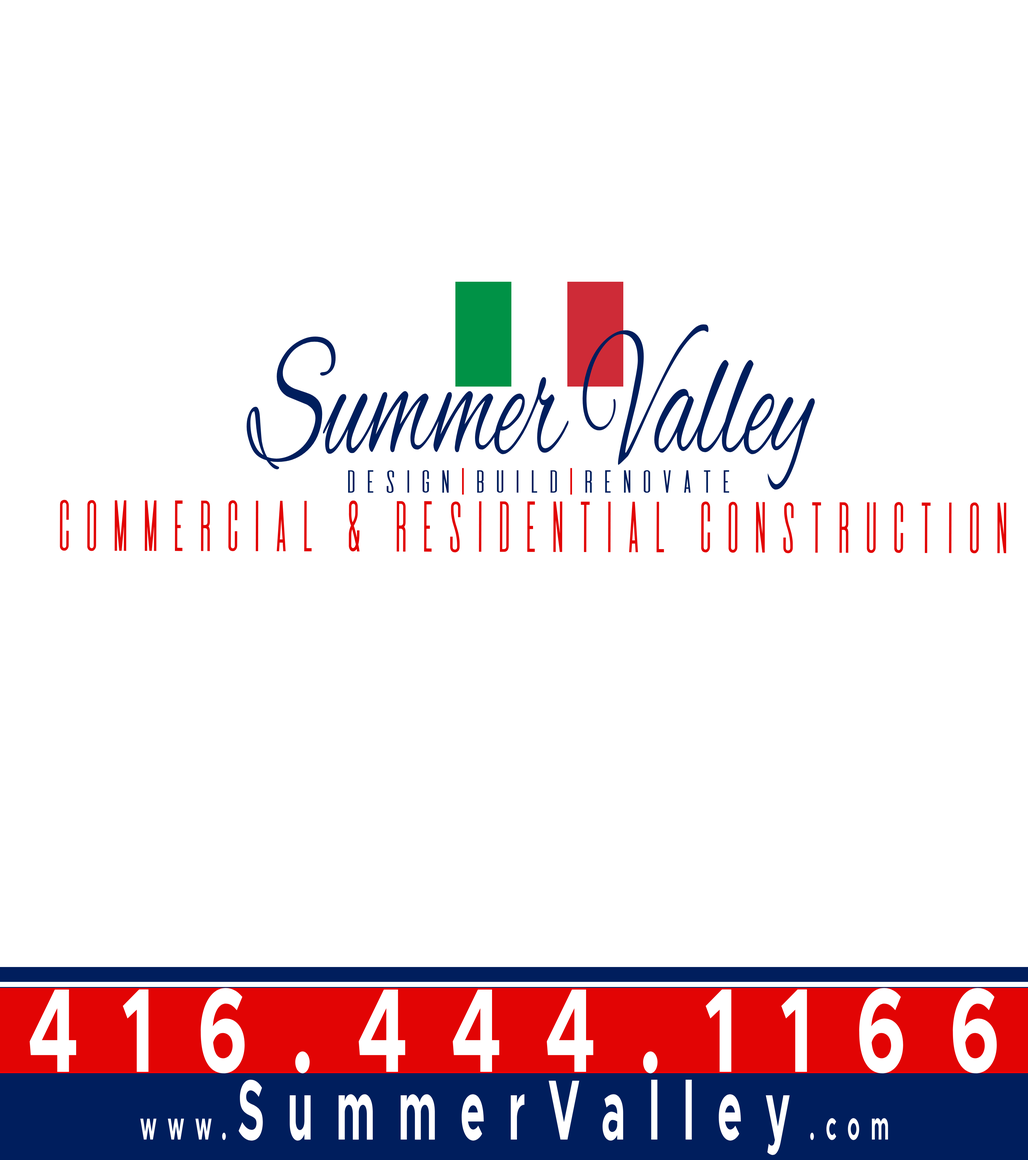
<style>
.page{position:relative;width:1028px;height:1160px;background:#ffffff}
.page>*{position:absolute;margin:0}
.t1{font:184.4px "AlexBrush-Regular";color:#001e5d;scale:0.55 1}
.t2{font:27.9px "DeValencia-Regular";color:#001e5d;scale:1.2 1}
.t3{font:27.9px "DeValencia-Regular";color:#e20404;scale:1.2 1}
.t4{font:63px "DeValencia-Regular";color:#e20404;scale:0.74 1}
.t5{font:120px "Metropolis-Bold";letter-spacing:0.542em;color:#ffffff;scale:0.66 1}
.t6{font:85.7px "Metropolis-Bold";letter-spacing:0.542em;color:#ffffff;scale:0.49 1}
.t7{font:40.5px "Metropolis-Bold";letter-spacing:0.542em;color:#ffffff;scale:0.49 1}
</style>
<div class="page">
<p class="t1" style="left:246px;top:324px;width:569px;height:166px">Summer Valley</p>
<p class="t2" style="left:348px;top:468px;width:381px;height:27px">Design<span class="t3">|</span>Build<span class="t3">|</span>Renovate</p>
<p class="t4" style="left:60px;top:500px;width:946px;height:54px">Commercial &amp; Residential Construction</p>
<p class="t5" style="left:30px;top:988px;width:967px;height:86px">416.444.1166</p>
<p class="t6" style="left:140px;top:1080px;width:748px;height:75px"><span class="t7">www.</span>SummerValley<span class="t7">.com</span></p>
</div>
